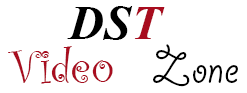
<style>
.page{position:relative;width:247px;height:93px;background:#ffffff}
.page>*{position:absolute;margin:0}
.t1{font:60px "Aparajita-BoldItalic";color:#000000}
.t2{font:60px "Aparajita-BoldItalic";color:#a80d1f}
.t3{font:48px "CurlzMT";color:#a80d1f}
.t4{font:48px "GiddyupStd";color:#000000}
</style>
<div class="page">
<p class="t1" style="left:67px;top:6px;width:98px;height:34px">DS<span class="t2">T</span></p>
<p class="t3" style="left:8px;top:44px;width:230px;height:43px">Video   <span class="t4">Zone</span></p>
</div>
